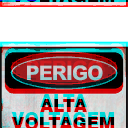
<style>
.page{position:relative;width:128px;height:128px;background:#ffffff}
.page>*{position:absolute;margin:0}
.t1{font:17.5px/17.9px "Swiss721BT-Black"}
</style>
<div class="page">
<p class="t1" style="left:11px;top:92px;width:104px;height:31px;text-align:center">ALTA<br>VOLTAGEM</p>
</div>
